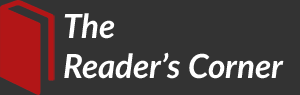
<style>
.page{position:relative;width:300px;height:95px;background:#333333}
.page>*{position:absolute;margin:0}
.t1{font:33.4px "Lato-BoldItalic";color:#ffffff}
</style>
<div class="page">
<p class="t1" style="left:64px;top:13px;width:220px;height:66px">The<br>Reader’s Corner</p>
</div>
